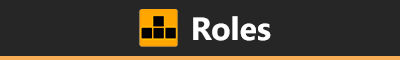
<style>
.page{position:relative;width:400px;height:60px;background:#262626}
.page>*{position:absolute;margin:0}
.t1{font:32px "SegoeUI-Bold";color:#ffffff}
</style>
<div class="page">
<p class="t1" style="left:193px;top:16px;width:78px;height:25px">Roles</p>
</div>
